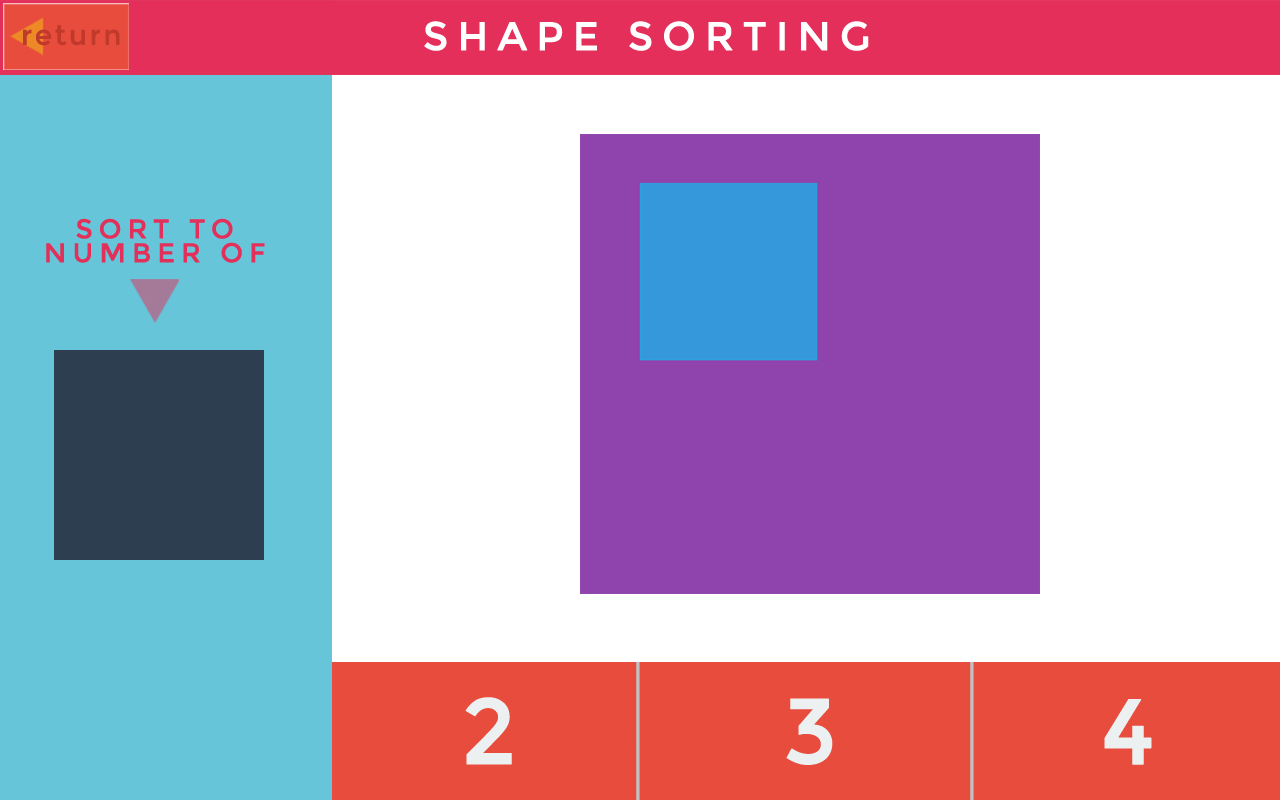
<style>
.page{position:relative;width:1280px;height:800px;background:#ffffff}
.page>*{position:absolute;margin:0}
.t1{font:27.6px "Montserrat-Regular";letter-spacing:0.075em;color:#c1392b;font-weight:bold}
.t2{font:40px "Montserrat-Regular";letter-spacing:0.2em;color:#ffffff;text-transform:uppercase;font-weight:bold}
.t3{font:27px/23.9px "Montserrat-Regular";letter-spacing:0.2em;color:#e3305a;text-transform:uppercase;font-weight:bold}
.t4{font:92.6px "Montserrat-Regular";letter-spacing:0.2em;color:#ecf0f1;text-transform:uppercase;font-weight:bold}
</style>
<div class="page">
<p class="t1" style="left:23px;top:25px;width:97px;height:21px">return</p>
<p class="t2" style="left:424px;top:21px;width:445px;height:30px">Shape Sorting</p>
<p class="t3" style="left:46px;top:218px;width:219px;height:45px;text-align:center">Sort to <br>number of</p>
<p class="t4" style="left:465px;top:697px;width:47px;height:68px">2</p>
<p class="t4" style="left:786px;top:698px;width:47px;height:67px">3</p>
<p class="t4" style="left:1104px;top:699px;width:48px;height:66px">4</p>
</div>
